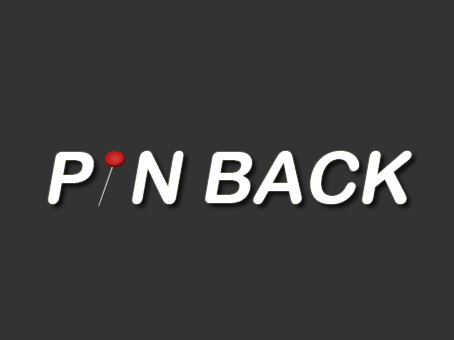
<style>
.page{position:relative;width:454px;height:340px;background:#333333}
.page>*{position:absolute;margin:0}
.t1{font:72px "ArialRoundedMTBold";color:#ffffff;font-style:italic}
</style>
<div class="page">
<p class="t1" style="left:48px;top:151px;width:364px;height:53px">P  N BACK</p>
</div>
